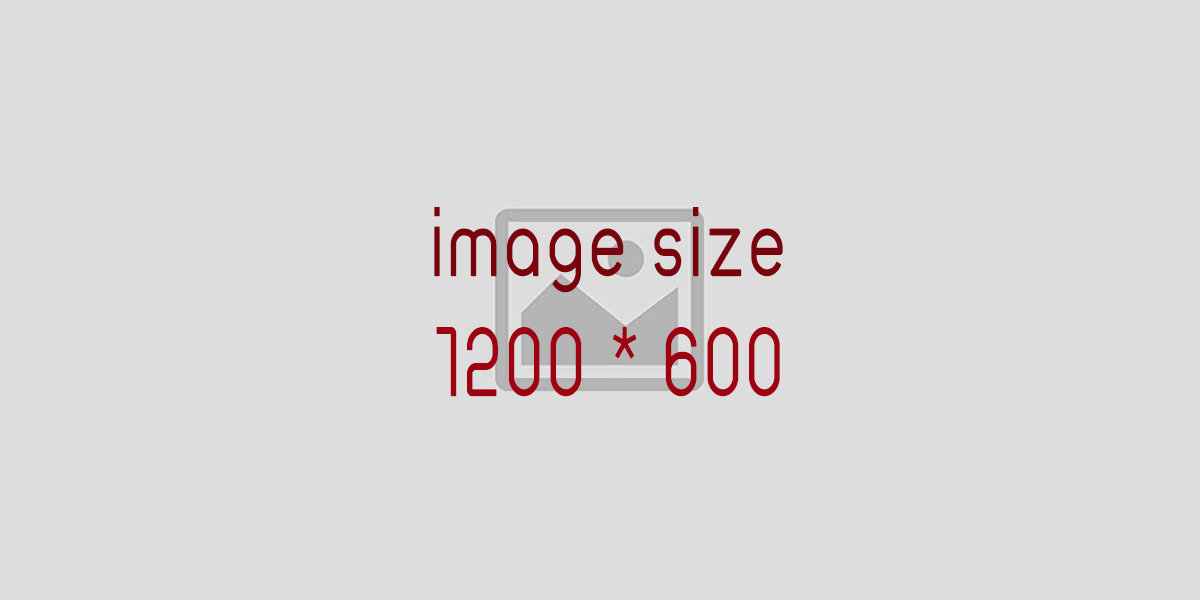
<style>
.page{position:relative;width:1200px;height:600px;background:#dddddd}
.page>*{position:absolute;margin:0}
.t1{font:96px/120px "JFFlat-Regular";letter-spacing:0.016em;color:#79020c;scale:0.78 1}
.t2{font:96px/120px "JFFlat-Regular";letter-spacing:0.016em;color:#9e0211;scale:0.78 1}
</style>
<div class="page">
<p class="t1" style="left:434px;top:207px;width:349px;height:190px;text-align:justify">image size<br><span class="t2">600 * 1200</span></p>
</div>
